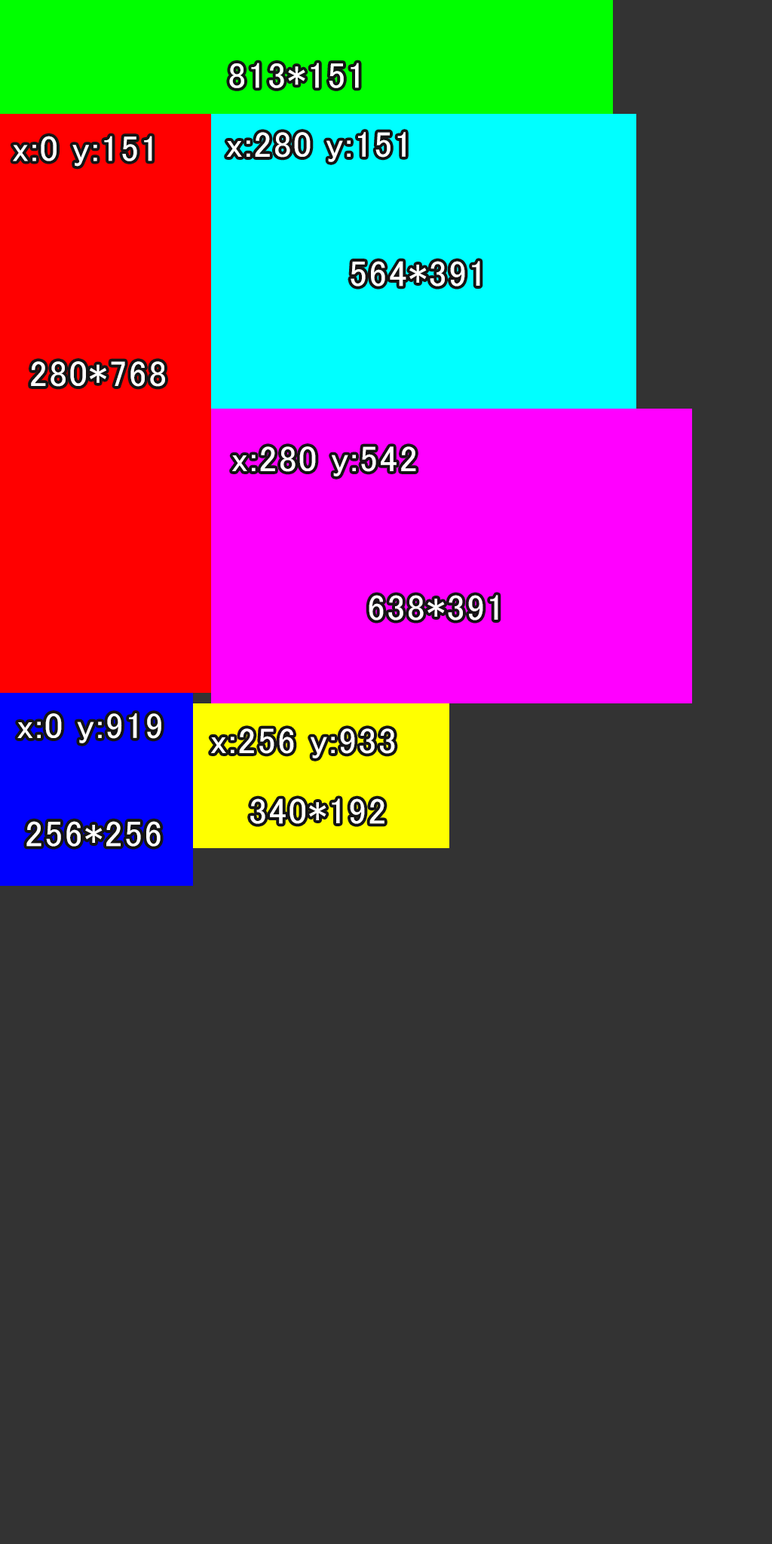
<style>
.page{position:relative;width:772px;height:1544px;background:#333333}
.page>*{position:absolute;margin:0}
.t1{font:36.2px "MS-PGothic";letter-spacing:0.05em;color:#ffffff}
</style>
<div class="page">
<p class="t1" style="left:229px;top:63px;width:130px;height:25px">813*151</p>
<p class="t1" style="left:13px;top:136px;width:139px;height:31px">x:0 y:151</p>
<p class="t1" style="left:227px;top:132px;width:179px;height:30px">x:280 y:151</p>
<p class="t1" style="left:351px;top:261px;width:129px;height:26px">564*391</p>
<p class="t1" style="left:31px;top:361px;width:134px;height:26px">280*768</p>
<p class="t1" style="left:232px;top:446px;width:184px;height:31px">x:280 y:542</p>
<p class="t1" style="left:369px;top:595px;width:129px;height:26px">638*391</p>
<p class="t1" style="left:17px;top:713px;width:144px;height:30px">x:0 y:919</p>
<p class="t1" style="left:211px;top:728px;width:184px;height:31px">x:256 y:933</p>
<p class="t1" style="left:250px;top:799px;width:135px;height:25px">340*192</p>
<p class="t1" style="left:26px;top:821px;width:135px;height:26px">256*256</p>
</div>
